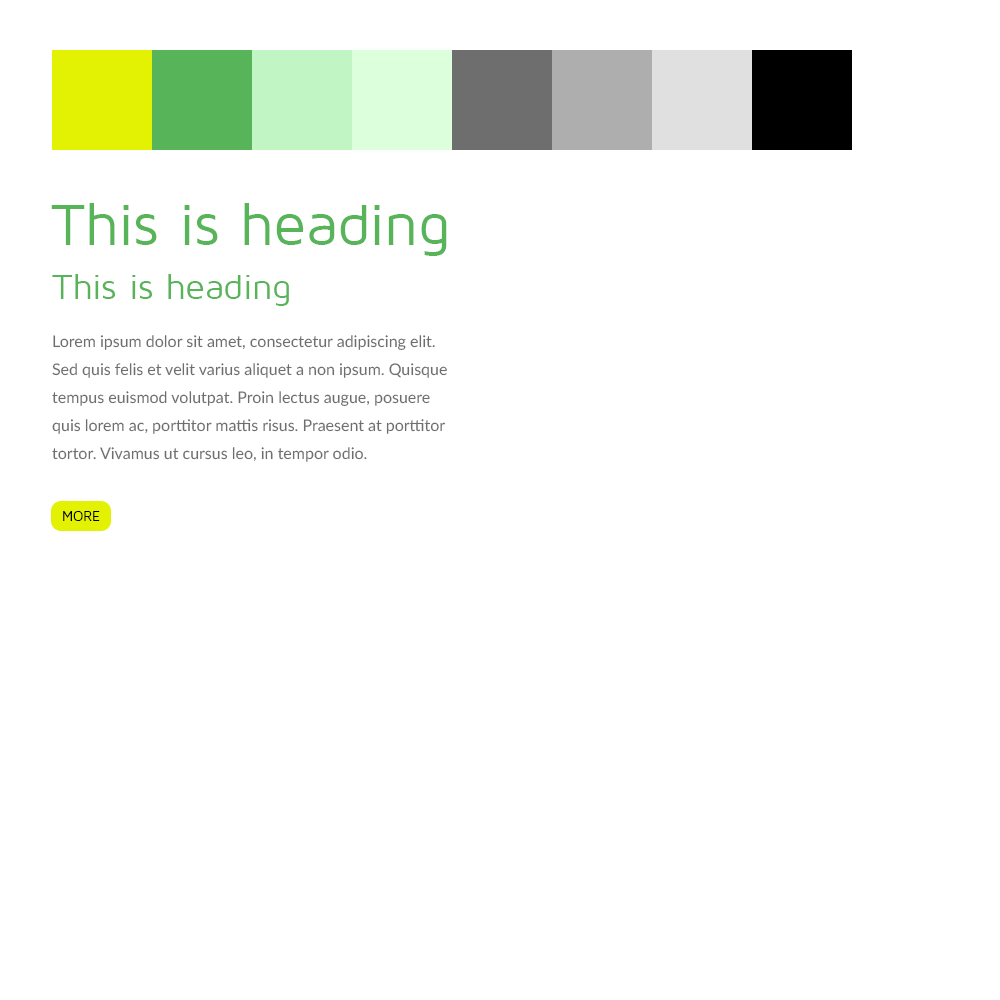
<style>
.page{position:relative;width:1000px;height:1000px;background:#ffffff}
.page>*{position:absolute;margin:0}
.t1{font:60px "MavenProRegular";color:#58b458}
.t2{font:36px "MavenProRegular";color:#58b458}
.t3{font:16px/28px "Lato-Regular";color:#6e6e6e}
.t4{font:14px "MavenProRegular";color:#000000}
</style>
<div class="page">
<p class="t1" style="left:51px;top:203px;width:396px;height:53px">This is heading</p>
<p class="t2" style="left:52px;top:274px;width:237px;height:32px">This is heading</p>
<p class="t3" style="left:52px;top:335px;width:395px;height:127px">Lorem ipsum dolor sit amet, consectetur adipiscing elit. Sed quis felis et velit varius aliquet a non ipsum. Quisque tempus euismod volutpat. Proin lectus augue, posuere quis lorem ac, porttitor mattis risus. Praesent at porttitor tortor. Vivamus ut cursus leo, in tempor odio.</p>
<p class="t4" style="left:63px;top:511px;width:37px;height:10px">MORE</p>
</div>
